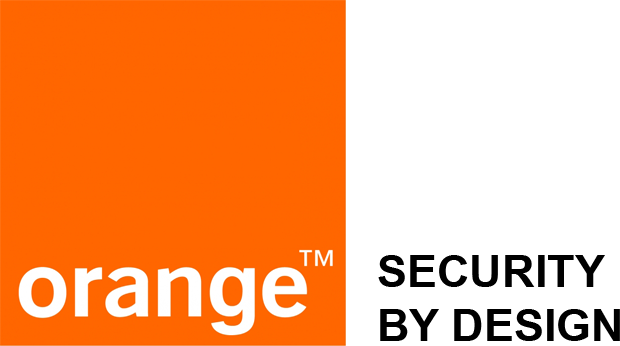
<style>
.page{position:relative;width:620px;height:346px;background:#ffffff}
.page>*{position:absolute;margin:0}
.t1{font:45.1px "Arial-BoldMT";color:#000000}
</style>
<div class="page">
<p class="t1" style="left:378px;top:255px;width:242px;height:86px">SECURITY<br>BY DESIGN</p>
</div>
